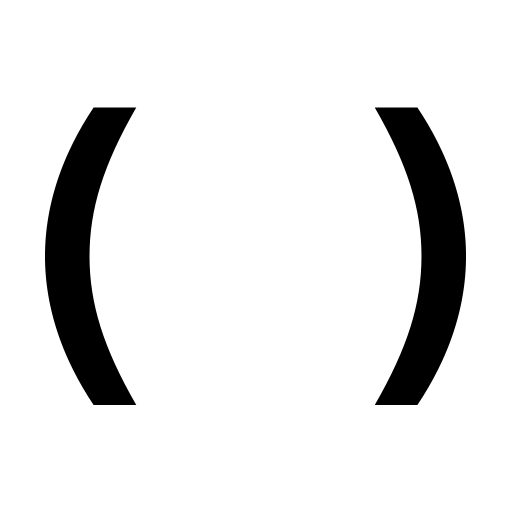
<style>
.page{position:relative;width:512px;height:512px;background:#ffffff}
.page>*{position:absolute;margin:0}
.t1{font:320px "Indivisible-SemiBold";letter-spacing:-0.02em;color:#000000}
</style>
<div class="page">
<p class="t1" style="left:45px;top:107px;width:92px;height:298px">(</p>
<p class="t1" style="left:375px;top:107px;width:91px;height:298px">)</p>
</div>
